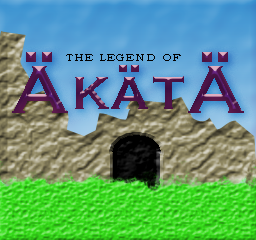
<style>
.page{position:relative;width:256px;height:240px}
.page>*{position:absolute;margin:0}
.t1{font:72px "Copperplate";color:#4d1546}
.t2{font:90px "Copperplate";color:#4d1546}
.t3{font:9.6px "BookmanOldStyle";letter-spacing:0.075em;color:#000000;text-transform:uppercase;scale:1.25 1}
</style>
<div class="page">
<p class="t1" style="left:12px;top:52px;width:232px;height:61px"><span class="t2">Ä</span>kät<span class="t2">Ä</span></p>
<p class="t3" style="left:66px;top:54px;width:115px;height:7px">the legend of</p>
</div>
